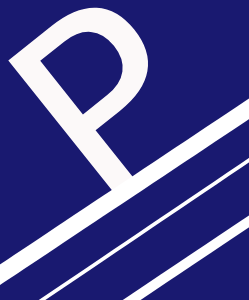
<style>
.page{position:relative;width:249px;height:300px;background:#191970}
.page>*{position:absolute;margin:0}
.t1{font:250px "DejaVuSans";color:#fcf9f9}
</style>
<div class="page">
<p class="t1" style="left:8px;top:7px;width:140px;height:196px;rotate:-39deg">P</p>
</div>
